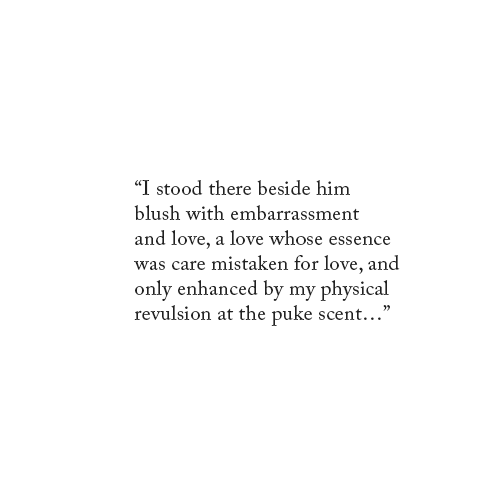
<style>
.page{position:relative;width:500px;height:500px;background:#ffffff}
.page>*{position:absolute;margin:0}
.t1{font:20.8px "ACaslonPro-Regular";letter-spacing:0.01em;color:#212121}
</style>
<div class="page">
<p class="t1" style="left:134px;top:180px;width:266px;height:146px">“I stood there beside him <br>blush with embarrassment <br>and love, a love whose essence <br>was care mistaken for love, and <br>only enhanced by my physical <br>revulsion at the puke scent…”</p>
</div>
